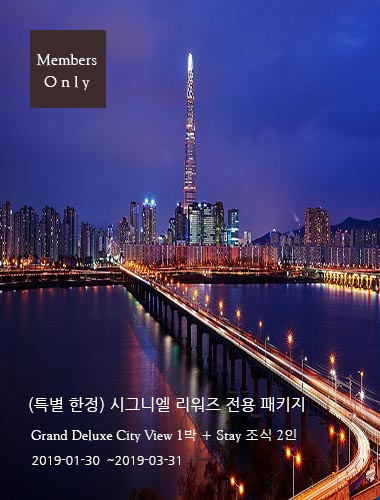
<style>
.page{position:relative;width:380px;height:500px}
.page>*{position:absolute;margin:0}
.t1{font:15.9px/22.3px "GoudyOlSt-BT";letter-spacing:0.01em;color:#ffffff}
.t2{font:14px/24px "GoudyOlSt-BT";letter-spacing:0.01em;color:#ffffff}
.t3{font:16px/30px "NanumGothic";letter-spacing:0.01em;color:#ffffff}
.t4{font:14px/24px "Gulim";letter-spacing:0.01em;color:#ffffff}
.t5{font:12px/24px "NanumGothic";letter-spacing:0.01em;color:#ffffff}
</style>
<div class="page">
<p class="t1" style="left:37px;top:54px;width:60px;height:36px;text-align:center">Members<br>O n l y</p>
<p class="t2" style="left:29px;top:397px;width:275px;height:68px"><span class="t3">(특별 한정) 시그니엘 리워즈 전용 패키지<br> </span>Grand Deluxe City View 1<span class="t4">박</span> + Stay <span class="t4">조식</span> 2<span class="t4">인<br> </span><span class="t5">2019-01-30  ~2019-03-31</span></p>
</div>
